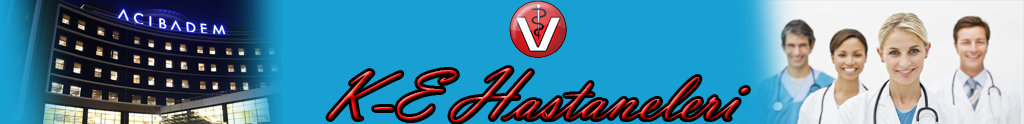
<style>
.page{position:relative;width:1024px;height:124px;background:#18a0d2}
.page>*{position:absolute;margin:0}
.t1{font:72px "VladimirScript"}
</style>
<div class="page">
<p class="t1" style="left:328px;top:68px;width:420px;height:54px">K-E Hastaneleri</p>
</div>
